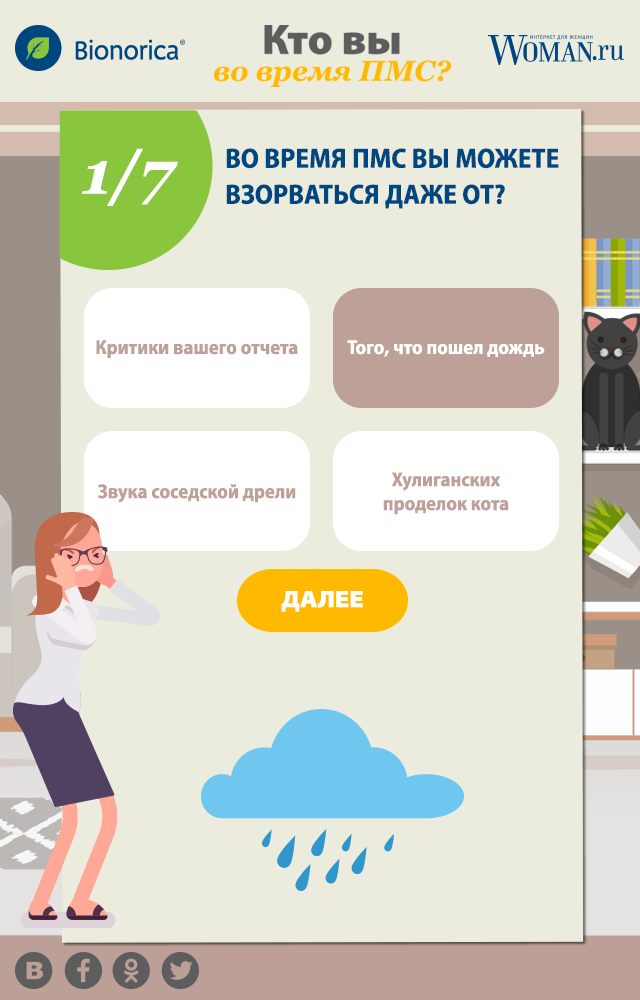
<style>
.page{position:relative;width:640px;height:1000px;background:#ececde}
.page>*{position:absolute;margin:0}
.t1{font:60px "Georgia-BoldItalic";color:#ffffff}
.t2{font:28px/36px "MyriadPro-BoldSemiCn";color:#00467f;text-transform:uppercase}
.t3{font:20px "MyriadPro-BoldSemiCn";color:#bda098}
.t4{font:20px "MyriadPro-BoldSemiCn";color:#ffffff}
.t5{font:24px "MyriadPro-BlackSemiExt";color:#ffffff;text-transform:uppercase}
</style>
<div class="page">
<p class="t1" style="left:82px;top:148px;width:96px;height:58px">1/7</p>
<p class="t2" style="left:226px;top:148px;width:333px;height:61px">Во время ПМС вы можете <br>взорваться даже от?</p>
<p class="t3" style="left:96px;top:340px;width:202px;height:18px">Критики вашего отчета</p>
<p class="t4" style="left:347px;top:340px;width:198px;height:17px">Того, что пошел дождь</p>
<p class="t3" style="left:383px;top:472px;width:126px;height:43px;text-align:center">Хулиганских <br>проделок кота</p>
<p class="t3" style="left:98px;top:484px;width:198px;height:19px">Звука соседской дрели</p>
<p class="t5" style="left:281px;top:591px;width:82px;height:21px">далее</p>
</div>
